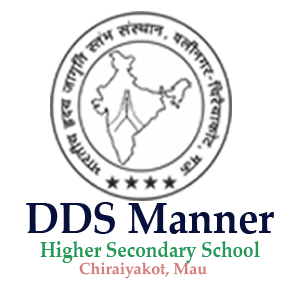
<style>
.page{position:relative;width:286px;height:291px;background:#ffffff}
.page>*{position:absolute;margin:0}
.t1{font:44.4px "PalatinoLinotype-Bold";color:#06103b;scale:0.91 1}
.t2{font:21.9px "PalatinoLinotype-Bold";color:#279957;scale:0.86 1}
.t3{font:16px "PalatinoLinotype-Bold";color:#d57c7c}
</style>
<div class="page">
<p class="t1" style="left:26px;top:202px;width:248px;height:32px">DDS Manner</p>
<p class="t2" style="left:40px;top:241px;width:220px;height:22px">Higher Secondary School</p>
<p class="t3" style="left:79px;top:262px;width:128px;height:17px">Chiraiyakot, Mau</p>
</div>
